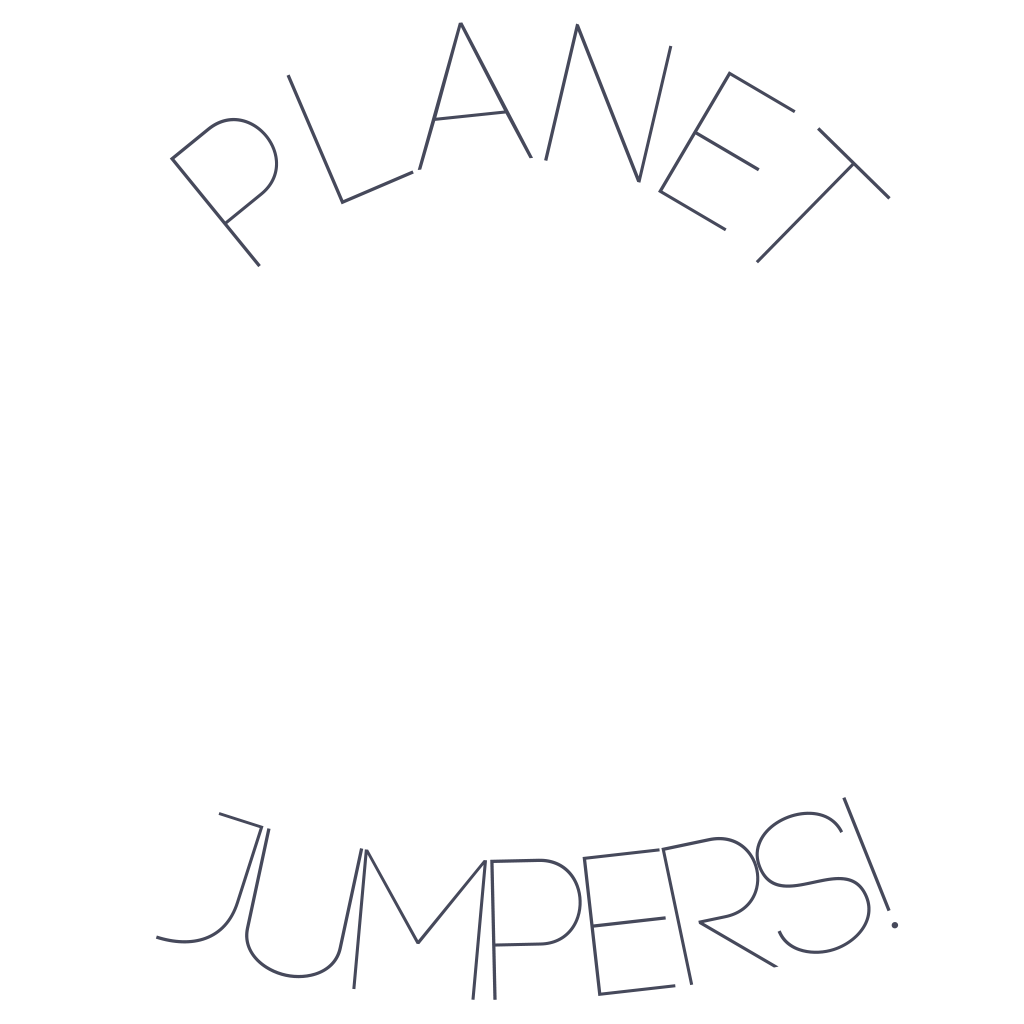
<style>
.page{position:relative;width:1024px;height:1024px;background:#ffffff}
.page>*{position:absolute;margin:0}
.t1{font:200px "Code-Light";color:#46495b}
</style>
<div class="page">
<p class="t1" style="left:169px;top:22px;width:722px;height:246px">Planet</p>
<p class="t1" style="left:155px;top:797px;width:744px;height:203px">Jumpers!</p>
</div>
